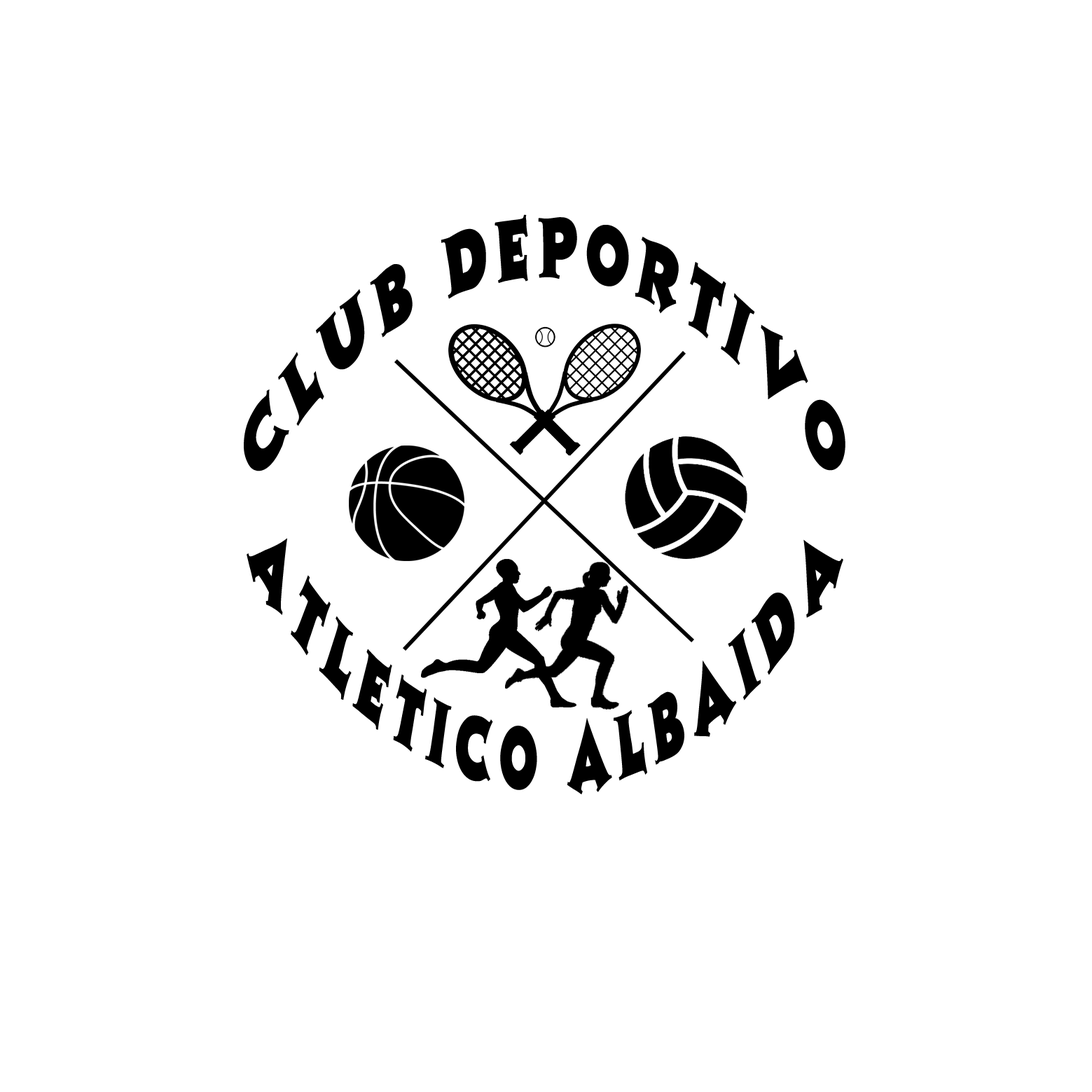
<style>
.page{position:relative;width:1092px;height:1092px;background:#ffffff}
.page>*{position:absolute;margin:0}
.t1{font:81.3px "Colbert";letter-spacing:0.15em;color:#000000;scale:0.52 1}
.t2{font:85.1px "Colbert";letter-spacing:0.15em;color:#000000;scale:0.5 1}
</style>
<div class="page">
<p class="t1" style="left:244px;top:214px;width:601px;height:257px;text-align:center">CLUB DEPORTIVO</p>
<p class="t2" style="left:247px;top:538px;width:596px;height:256px;text-align:center">ATLETICO ALBAIDA</p>
</div>
